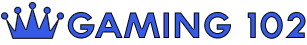
<style>
.page{position:relative;width:307px;height:45px;background:#ffffff}
.page>*{position:absolute;margin:0}
.t1{font:33px "TYPOGRAPHPRO-ExtraBold"}
</style>
<div class="page">
<p class="t1" style="left:67px;top:11px;width:239px;height:28px">Gaming 102</p>
</div>
